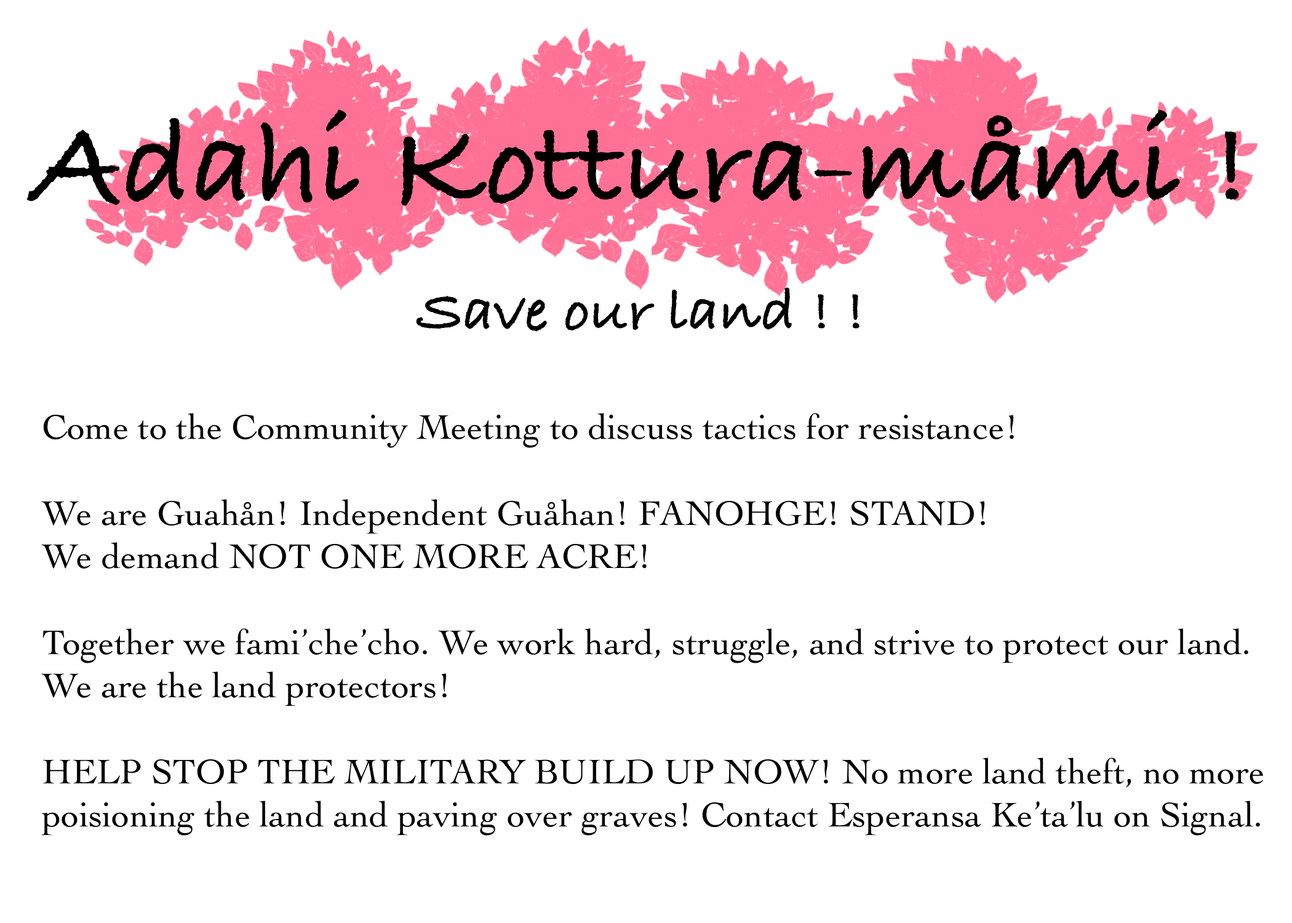
<style>
.page{position:relative;width:1292px;height:923px;background:#ffffff}
.page>*{position:absolute;margin:0}
.t1{font:123.1px "BradleyHandITCTT-Bold";color:#000000}
.t2{font:61.5px "BradleyHandITCTT-Bold";color:#000000}
.t3{font:35.9px "Cochin";color:#000000}
</style>
<div class="page">
<p class="t1" style="left:26px;top:110px;width:1213px;height:96px">Adahi Kottura-måmi !</p>
<p class="t2" style="left:416px;top:287px;width:444px;height:45px">Save our land ! !</p>
<p class="t3" style="left:41px;top:413px;width:1222px;height:423px">Come to the Community Meeting to discuss tactics for resistance!<br><br>We are Guahån! Independent Guåhan! FANOHGE! STAND! <br>We demand NOT ONE MORE ACRE!<br><br>Together we fami’che’cho. We work hard, struggle, and strive to protect our land.<br>We are the land protectors!<br><br>HELP STOP THE MILITARY BUILD UP NOW! No more land theft, no more <br>poisioning the land and paving over graves! Contact Esperansa Ke’ta’lu on Signal.</p>
</div>
